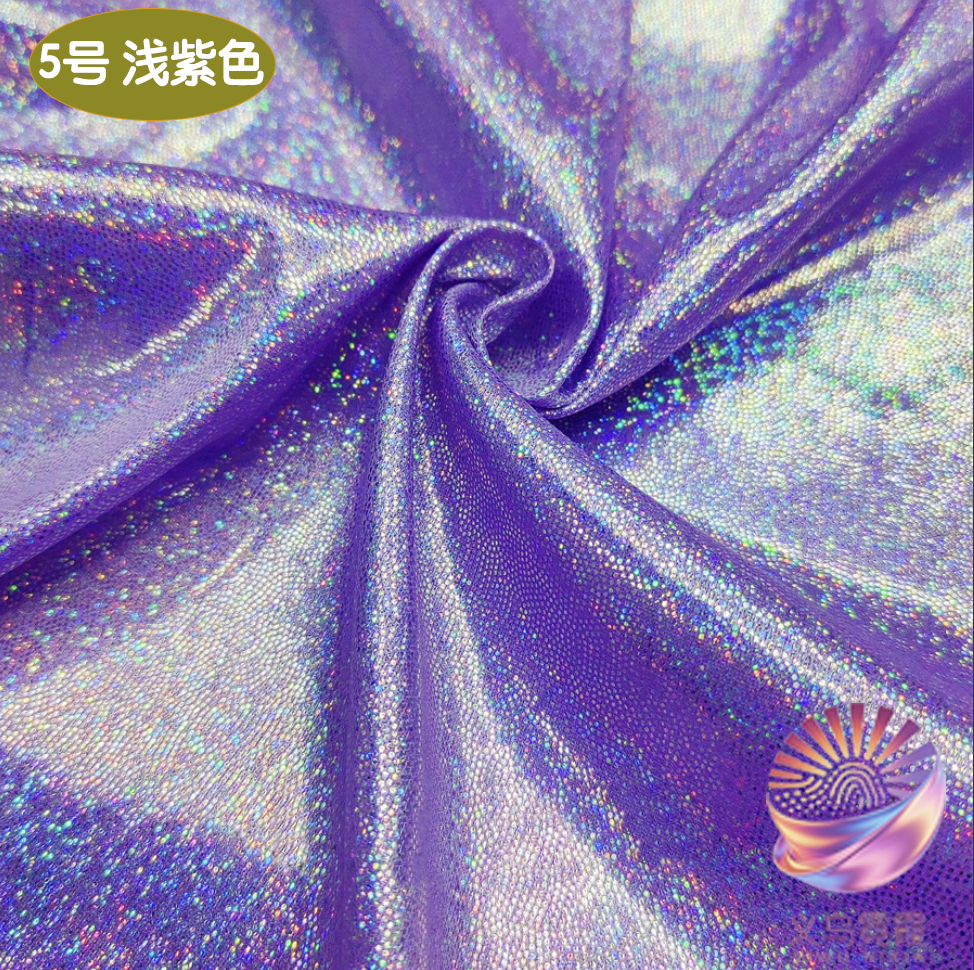
<style>
.page{position:relative;width:974px;height:970px}
.page>*{position:absolute;margin:0}
.t1{font:49.1px "STYuanti-SC-Bold";color:#ffffff;scale:0.97 1}
.t2{font:84.6px "STBaoliSC-Regular";color:#ffffff;scale:0.97 1}
</style>
<div class="page">
<p class="t1" style="left:39px;top:38px;width:225px;height:49px"><span class="t2">         </span>5号 浅紫色</p>
</div>
